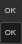
<style>
.page{position:relative;width:22px;height:44px;background:#2f2f2f}
.page>*{position:absolute;margin:0}
.t1{font:10px "Tunga";color:#b1b1b1}
</style>
<div class="page">
<p class="t1" style="left:4px;top:8px;width:12px;height:5px">OK</p>
<p class="t1" style="left:5px;top:30px;width:12px;height:5px">OK</p>
</div>
